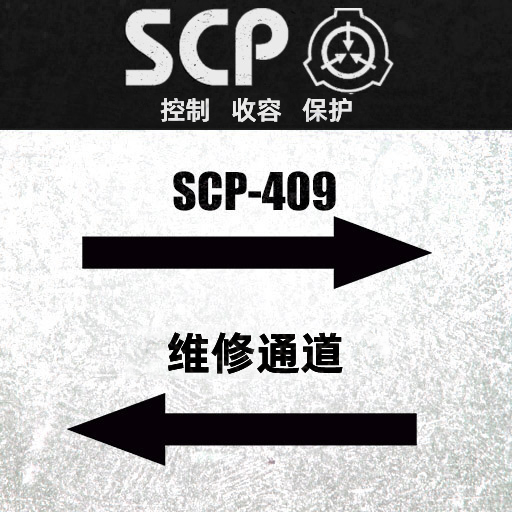
<style>
.page{position:relative;width:512px;height:512px}
.page>*{position:absolute;margin:0}
.t1{font:26px "AlibabaPuHuiTiM";color:#e5e5e5}
.t2{font:45.3px "AlibabaPuHuiTiB";color:#000000}
</style>
<div class="page">
<p class="t1" style="left:160px;top:97px;width:192px;height:26px">控制   收容   保护</p>
<p class="t2" style="left:168px;top:332px;width:175px;height:42px">维修通道</p>
</div>
